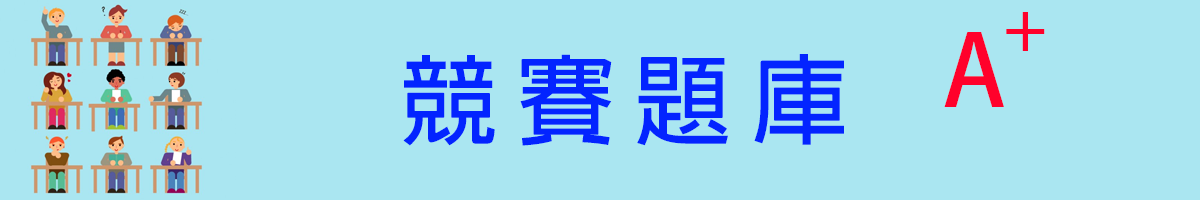
<style>
.page{position:relative;width:1200px;height:200px;background:#aae6f1}
.page>*{position:absolute;margin:0}
.t1{font:65px "AdobeFanHeitiStd-Bold";letter-spacing:0.2em;color:#ff012b}
.t2{font:97.5px "AdobeFanHeitiStd-Bold";letter-spacing:0.2em;color:#ff012b}
.t3{font:97.5px "AdobeFanHeitiStd-Bold";letter-spacing:0.2em;color:#0324ff}
</style>
<div class="page">
<p class="t1" style="left:1006px;top:12px;width:39px;height:39px">+</p>
<p class="t2" style="left:944px;top:32px;width:60px;height:75px">A</p>
<p class="t3" style="left:403px;top:54px;width:441px;height:92px">競賽題庫</p>
</div>
